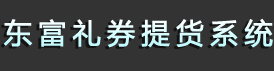
<style>
.page{position:relative;width:274px;height:71px;background:#333333}
.page>*{position:absolute;margin:0}
.t1{font:28px "MicrosoftYaHei";letter-spacing:0.2em;font-weight:bold}
</style>
<div class="page">
<p class="t1" style="left:3px;top:18px;width:270px;height:30px">东富礼券提货系统</p>
</div>
